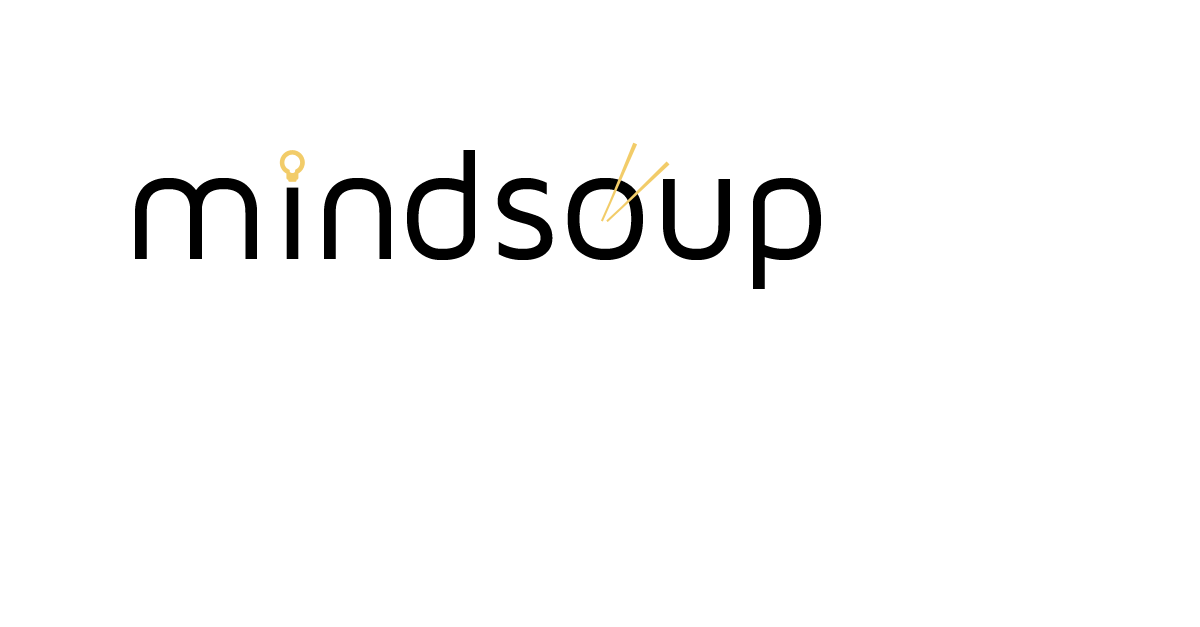
<style>
.page{position:relative;width:1200px;height:627px;background:#ffffff}
.page>*{position:absolute;margin:0}
.t1{font:160px "MavenProRegular";letter-spacing:0.015em;color:#000000}
.t2{font:160px "MavenProRegular";color:#000000}
.t3{font:160px "MavenProRegular";letter-spacing:-0.025em;color:#000000}
.t4{font:160px "MavenProRegular";letter-spacing:0.15em;color:#000000}
</style>
<div class="page">
<p class="t1" style="left:407px;top:150px;width:414px;height:139px">ds<span class="t2">o</span><span class="t3">up</span></p>
<p class="t4" style="left:135px;top:178px;width:67px;height:81px">u</p>
<p class="t4" style="left:190px;top:178px;width:67px;height:81px">u</p>
<p class="t4" style="left:324px;top:178px;width:67px;height:81px">u</p>
</div>
